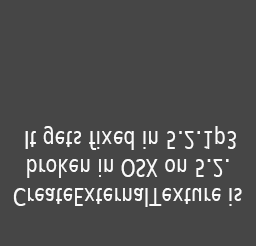
<style>
.page{position:relative;width:256px;height:246px;background:#464646}
.page>*{position:absolute;margin:0}
.t1{font:24px "LucidaGrande";color:#fafafa;scale:0.8 1}
</style>
<div class="page">
<p class="t1" style="left:13px;top:126px;width:229px;height:81px;text-align:center">CreateExternalTexture is <br>broken in OSX on 5.2. <br>It gets fixed in 5.2.1p3</p>
</div>
